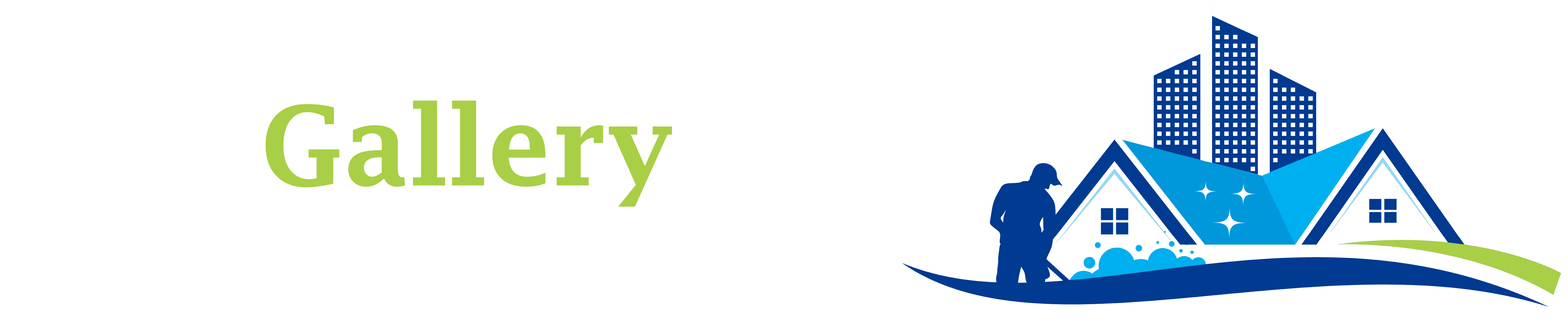
<style>
.page{position:relative;width:1568px;height:323px;background:#ffffff}
.page>*{position:absolute;margin:0}
.t1{font:109.8px "LucidaFax-Demi";color:#a8cf45}
</style>
<div class="page">
<p class="t1" style="left:266px;top:100px;width:406px;height:107px">Gallery</p>
</div>
